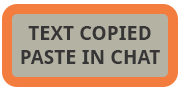
<style>
.page{position:relative;width:180px;height:90px;background:#b4b2a3}
.page>*{position:absolute;margin:0}
.t1{font:20px/24px "DroidSans-Bold";color:#363636}
</style>
<div class="page">
<p class="t1" style="left:21px;top:26px;width:139px;height:38px;text-align:center">TEXT COPIED<br>PASTE IN CHAT</p>
</div>
